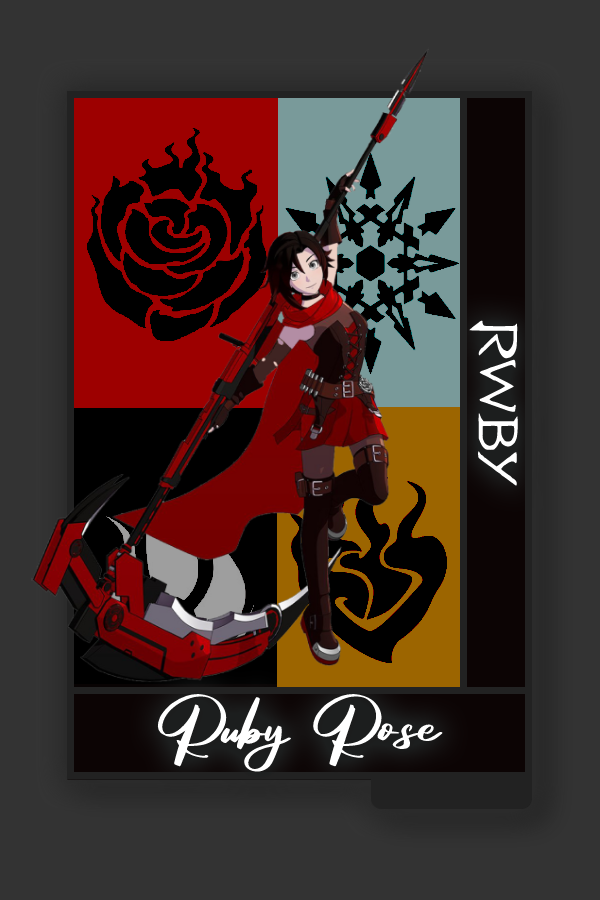
<style>
.page{position:relative;width:600px;height:900px;background:#333333}
.page>*{position:absolute;margin:0}
.t1{font:61.3px "RWBY_Style";color:#ffffff;scale:1.25 1}
.t2{font:75px "RosegaFREE";color:#ffffff}
</style>
<div class="page">
<p class="t1" style="left:469px;top:320px;width:49px;height:166px;rotate:90deg">RWBY</p>
<p class="t2" style="left:157px;top:693px;width:286px;height:79px">Ruby Rose</p>
</div>
